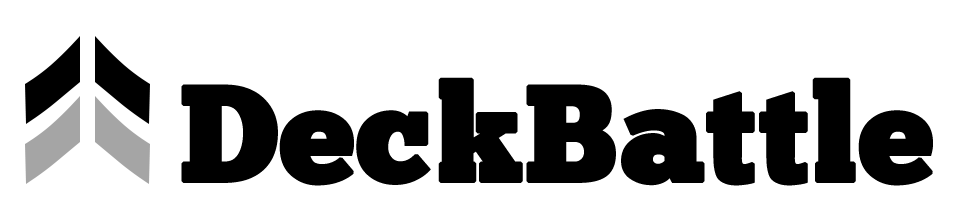
<style>
.page{position:relative;width:956px;height:207px;background:#ffffff}
.page>*{position:absolute;margin:0}
.t1{font:135px "ChunkFive";color:#010101;font-weight:bold}
</style>
<div class="page">
<p class="t1" style="left:181px;top:77px;width:752px;height:109px">DeckBattle</p>
</div>
